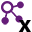
<style>
.page{position:relative;width:32px;height:32px;background:#ffffff}
.page>*{position:absolute;margin:0}
.t1{font:24px "MyriadPro-Bold";color:#000000}
</style>
<div class="page">
<p class="t1" style="left:18px;top:20px;width:13px;height:12px">x</p>
</div>
